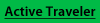
<style>
.page{position:relative;width:100px;height:23px;background:#00ba46}
.page>*{position:absolute;margin:0}
.t1{font:14px "MyriadPro-Semibold";color:#000000;text-decoration:underline}
</style>
<div class="page">
<p class="t1" style="left:4px;top:6px;width:92px;height:13px">Active Traveler</p>
</div>
